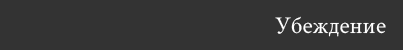
<style>
.page{position:relative;width:403px;height:50px;background:#333333}
.page>*{position:absolute;margin:0}
.t1{font:24px "CrimsonText-Regular";color:#ffffff}
</style>
<div class="page">
<p class="t1" style="left:275px;top:16px;width:111px;height:21px">Убеждение</p>
</div>
